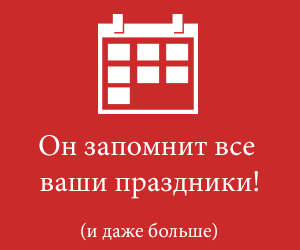
<style>
.page{position:relative;width:300px;height:250px;background:#ca2a2a}
.page>*{position:absolute;margin:0}
.t1{font:30px/18px "MinionPro-Regular";color:#ffffff}
.t2{font:20px "MinionPro-Regular";color:#ffffff}
</style>
<div class="page">
<p class="t1" style="left:39px;top:135px;width:219px;height:64px;text-align:center">Он запомнит все <br><br>ваши праздники!</p>
<p class="t2" style="left:81px;top:222px;width:136px;height:19px">(и даже больше)</p>
</div>
